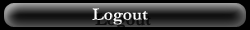
<style>
.page{position:relative;width:250px;height:30px;background:#000000}
.page>*{position:absolute;margin:0}
.t1{font:18px "Garamond-Bold";color:#ffffff}
</style>
<div class="page">
<p class="t1" style="left:92px;top:8px;width:56px;height:17px">Logout</p>
</div>
